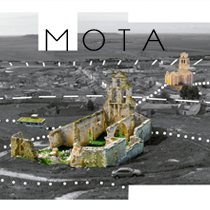
<style>
.page{position:relative;width:210px;height:210px}
.page>*{position:absolute;margin:0}
.t1{font:27px "SusannaRegular";letter-spacing:0.42em;color:#040000;font-weight:bold}
</style>
<div class="page">
<p class="t1" style="left:45px;top:29px;width:120px;height:22px">MOTA</p>
</div>
